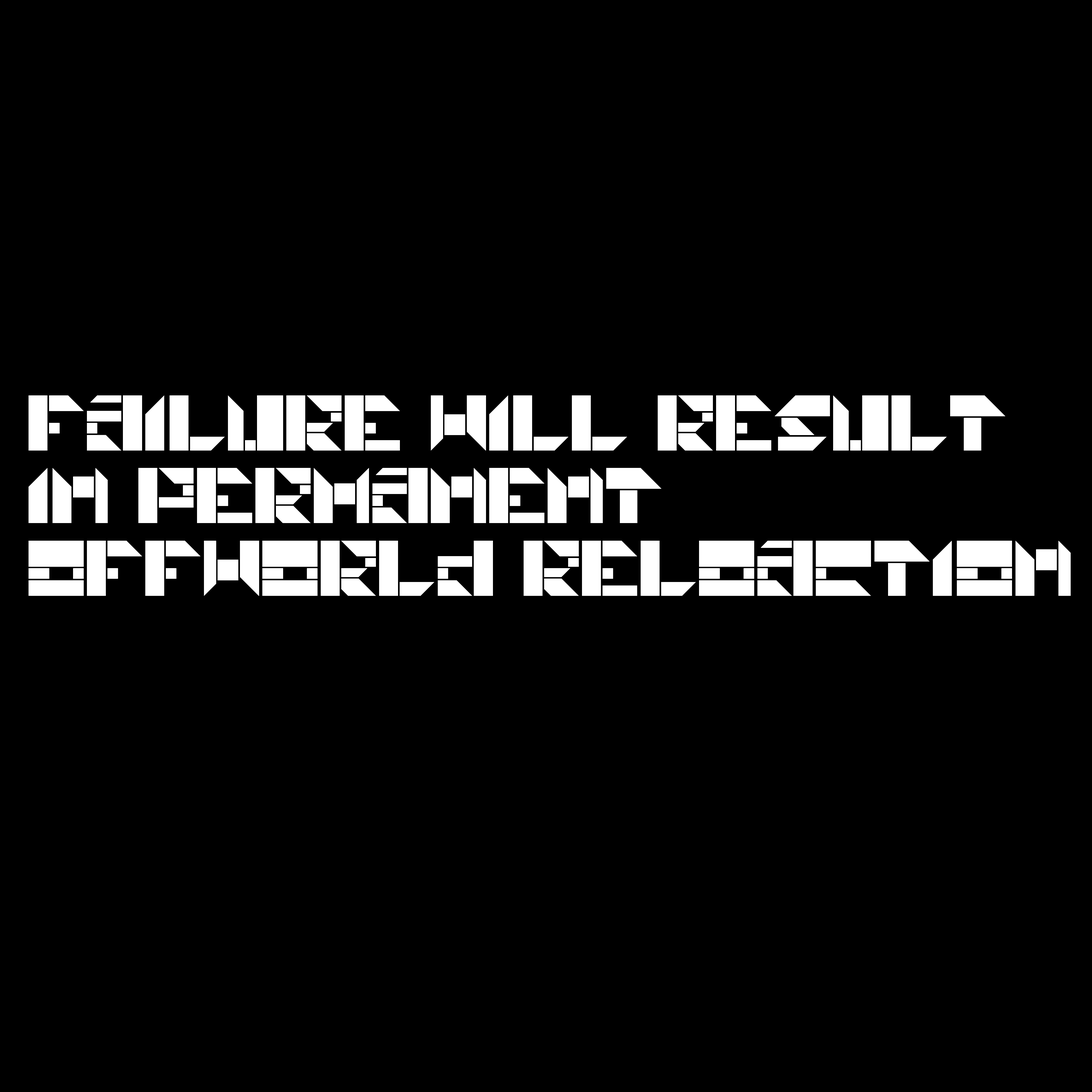
<style>
.page{position:relative;width:1092px;height:1092px;background:#000000}
.page>*{position:absolute;margin:0}
.t1{font:55px/72.6px "Universal-Union";color:#ffffff}
</style>
<div class="page">
<p class="t1" style="left:29px;top:395px;width:1042px;height:201px">Failure will result <br>in permanent <br>offworld reloaction</p>
</div>
